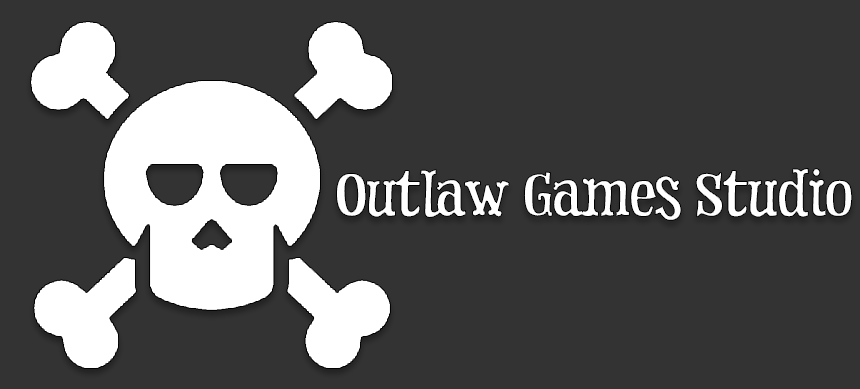
<style>
.page{position:relative;width:860px;height:389px;background:#333333}
.page>*{position:absolute;margin:0}
.t1{font:58.2px "DryCowboy";letter-spacing:-0.04em;color:#ffffff}
</style>
<div class="page">
<p class="t1" style="left:336px;top:168px;width:517px;height:53px">Outlaw Games Studio</p>
</div>
